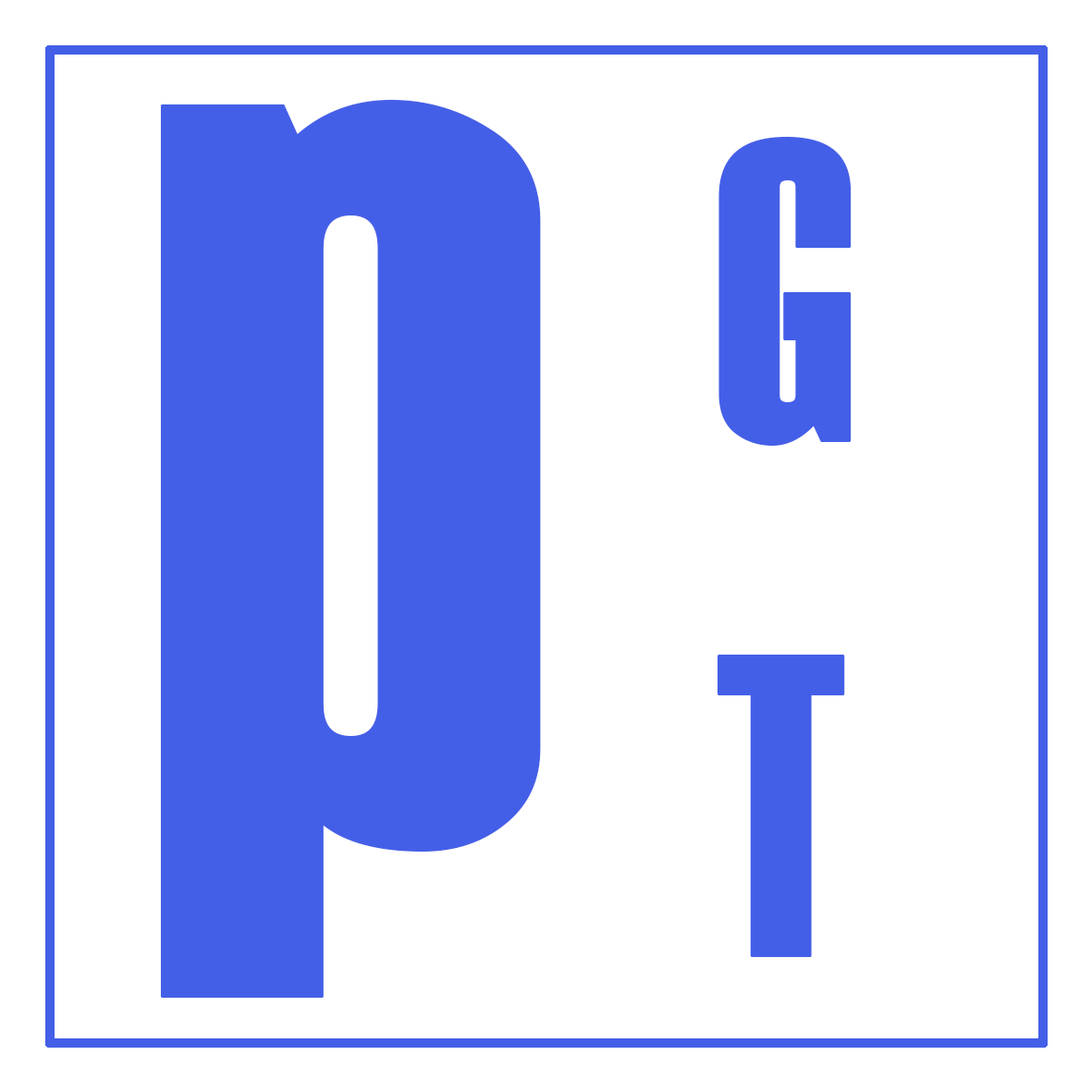
<style>
.page{position:relative;width:1092px;height:1092px;background:#ffffff}
.page>*{position:absolute;margin:0}
.t1{font:1297.6px "Haettenschweiler";letter-spacing:0.05em;color:#445fe7;font-weight:bold;scale:0.89 1}
.t2{font:429.5px "Haettenschweiler";letter-spacing:0.05em;color:#445fe7;font-weight:bold;scale:0.89 1}
</style>
<div class="page">
<p class="t1" style="left:160px;top:99px;width:381px;height:900px">p</p>
<p class="t2" style="left:718px;top:136px;width:134px;height:822px">G<br>T</p>
</div>
